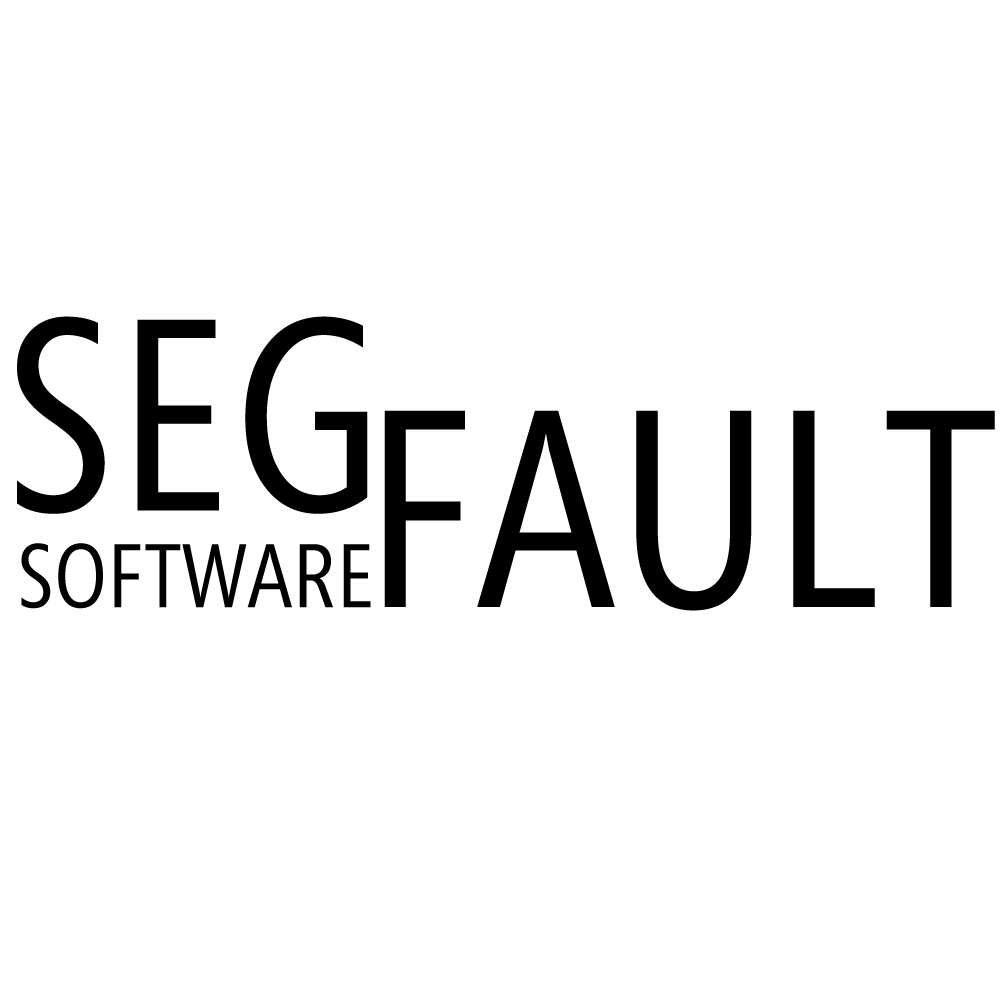
<style>
.page{position:relative;width:1000px;height:1000px;background:#ffffff}
.page>*{position:absolute;margin:0}
.t1{font:272px "SegoeCondensed";color:#000000}
.t2{font:280px "SegoeCondensed";color:#000000}
.t3{font:90px "SegoeCondensed";color:#000000}
</style>
<div class="page">
<p class="t1" style="left:17px;top:316px;width:351px;height:198px">SEG</p>
<p class="t2" style="left:384px;top:410px;width:611px;height:201px">FAULT</p>
<p class="t3" style="left:21px;top:543px;width:350px;height:66px">SOFTWARE</p>
</div>
